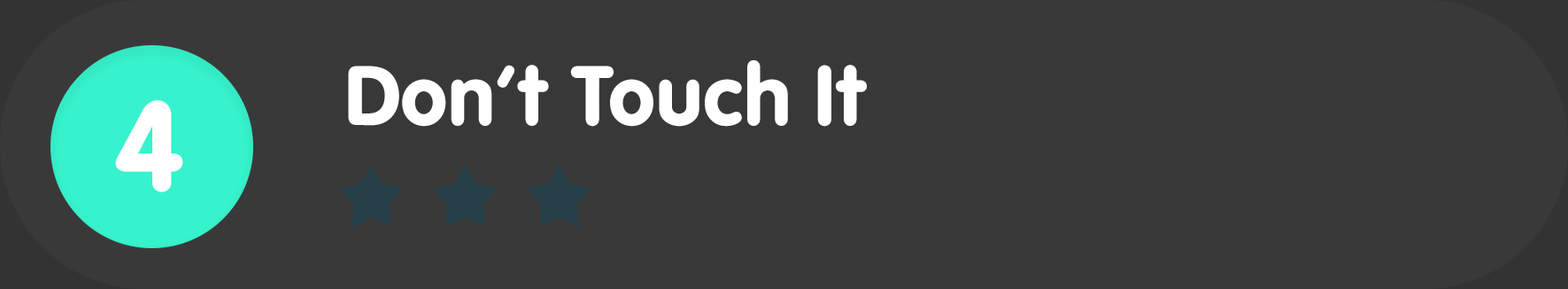
<style>
.page{position:relative;width:1568px;height:289px;background:#393939}
.page>*{position:absolute;margin:0}
.t1{font:88.5px "VAGRundschriftD";color:#ffffff}
.t2{font:132.8px "VAGRundschriftD";color:#ffffff}
</style>
<div class="page">
<p class="t1" style="left:348px;top:59px;width:519px;height:68px">Don’t Touch It</p>
<p class="t2" style="left:115px;top:100px;width:68px;height:92px">4</p>
</div>
